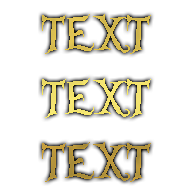
<style>
.page{position:relative;width:192px;height:192px;background:#ffffff}
.page>*{position:absolute;margin:0}
.t1{font:53px "AliceinWonderland";color:#dabd4d}
.t2{font:53px "AliceinWonderland";color:#f4e46b}
.t3{font:53px "AliceinWonderland";color:#b79439}
</style>
<div class="page">
<p class="t1" style="left:42px;top:14px;width:109px;height:40px">TEXT</p>
<p class="t2" style="left:42px;top:78px;width:109px;height:40px">TEXT</p>
<p class="t3" style="left:42px;top:142px;width:109px;height:40px">TEXT</p>
</div>
